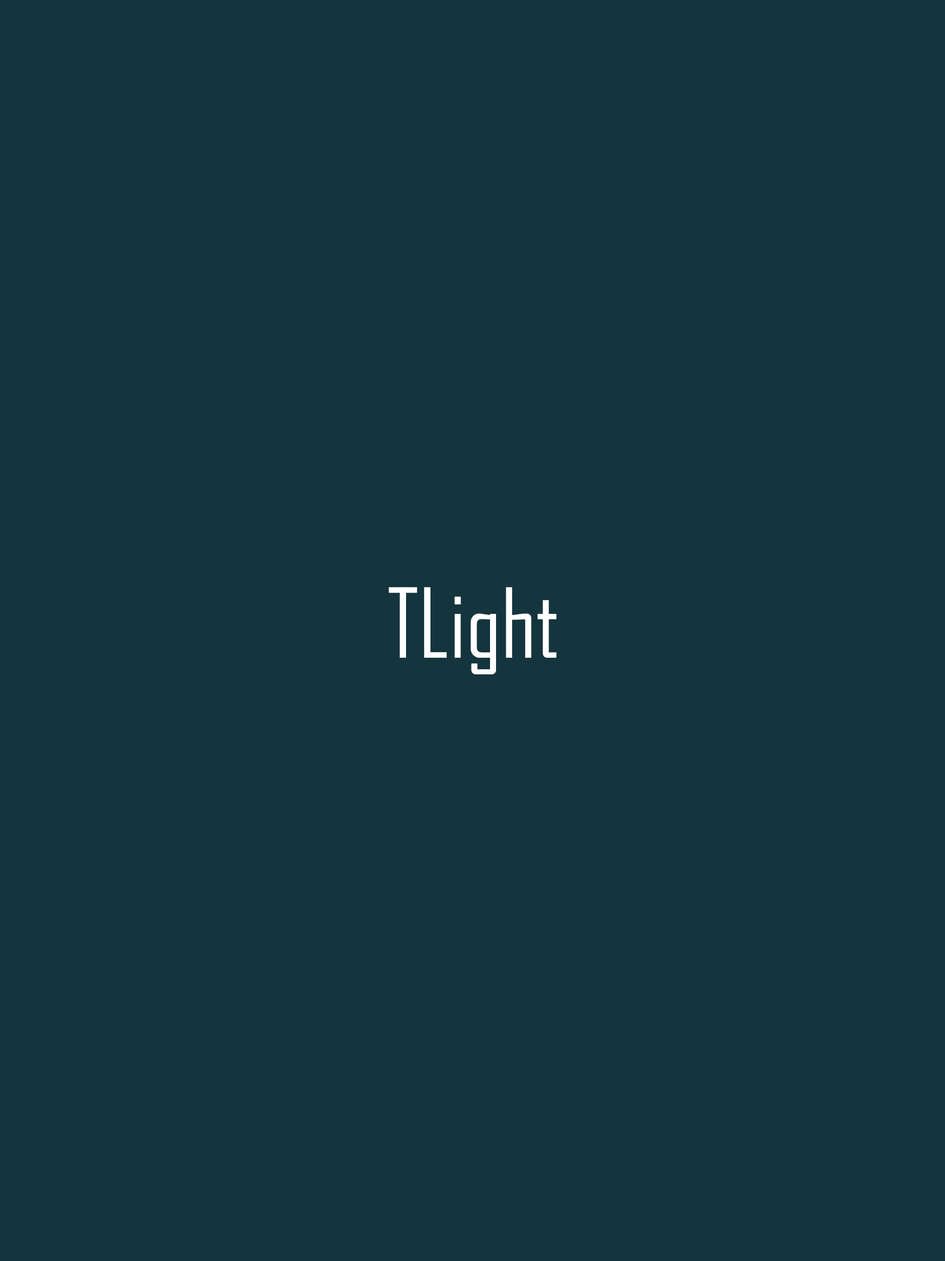
<style>
.page{position:relative;width:945px;height:1261px;background:#15353e}
.page>*{position:absolute;margin:0}
.t1{font:92.3px "AgencyFB-Reg";color:#ffffff}
</style>
<div class="page">
<p class="t1" style="left:389px;top:587px;width:168px;height:87px">TLight</p>
</div>
